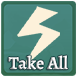
<style>
.page{position:relative;width:77px;height:77px}
.page>*{position:absolute;margin:0}
.t1{font:18px "AlegreyaRoman-Bold"}
</style>
<div class="page">
<p class="t1" style="left:8px;top:55px;width:60px;height:15px">Take All</p>
</div>
